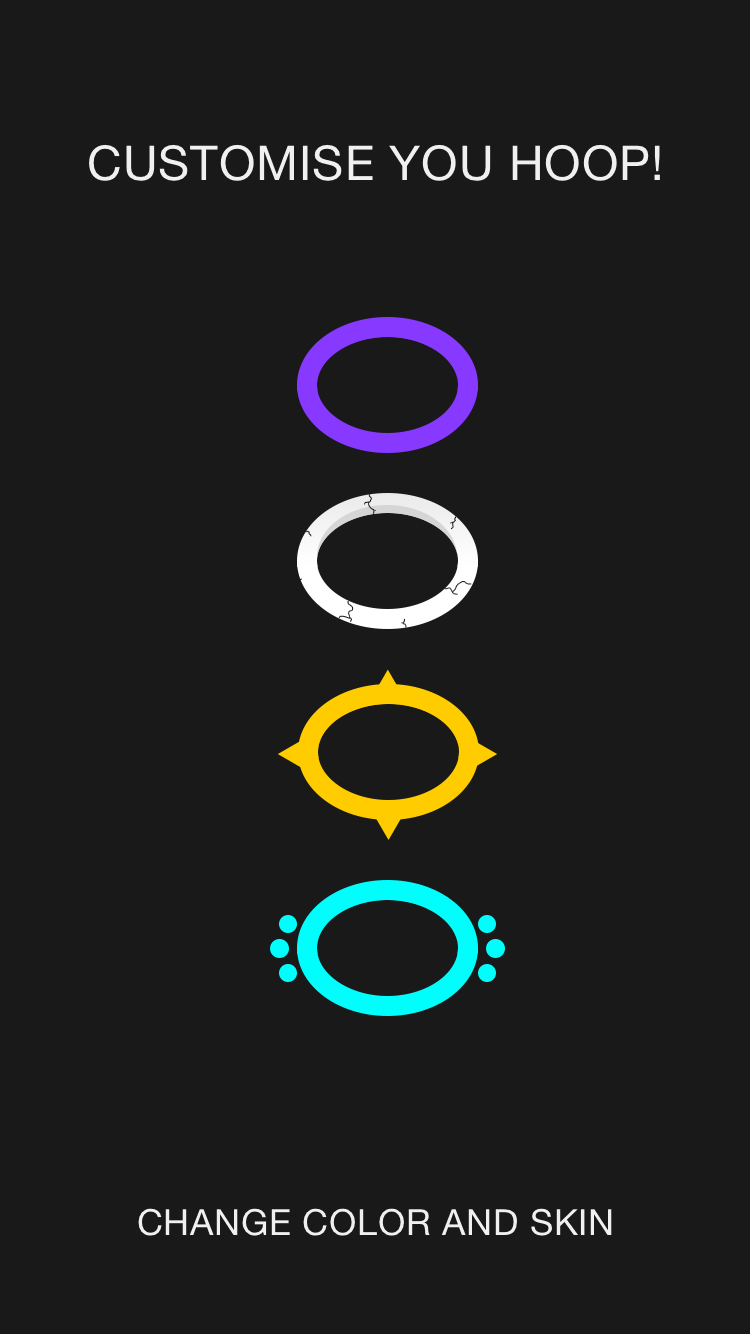
<style>
.page{position:relative;width:750px;height:1334px;background:#191919}
.page>*{position:absolute;margin:0}
.t1{font:48px "HelveticaNeue";letter-spacing:0.02em;color:#f0f0f0}
.t2{font:36px "HelveticaNeue";letter-spacing:0.02em;color:#f0f0f0}
</style>
<div class="page">
<p class="t1" style="left:89px;top:144px;width:571px;height:37px">CUSTOMISE YOU HOOP!</p>
<p class="t2" style="left:138px;top:1208px;width:474px;height:28px">CHANGE COLOR AND SKIN</p>
</div>
